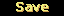
<style>
.page{position:relative;width:64px;height:16px;background:#000000}
.page>*{position:absolute;margin:0}
.t1{font:13px "Meiryo";color:#f0f080;font-weight:bold}
</style>
<div class="page">
<p class="t1" style="left:16px;top:2px;width:32px;height:9px">Save</p>
</div>
